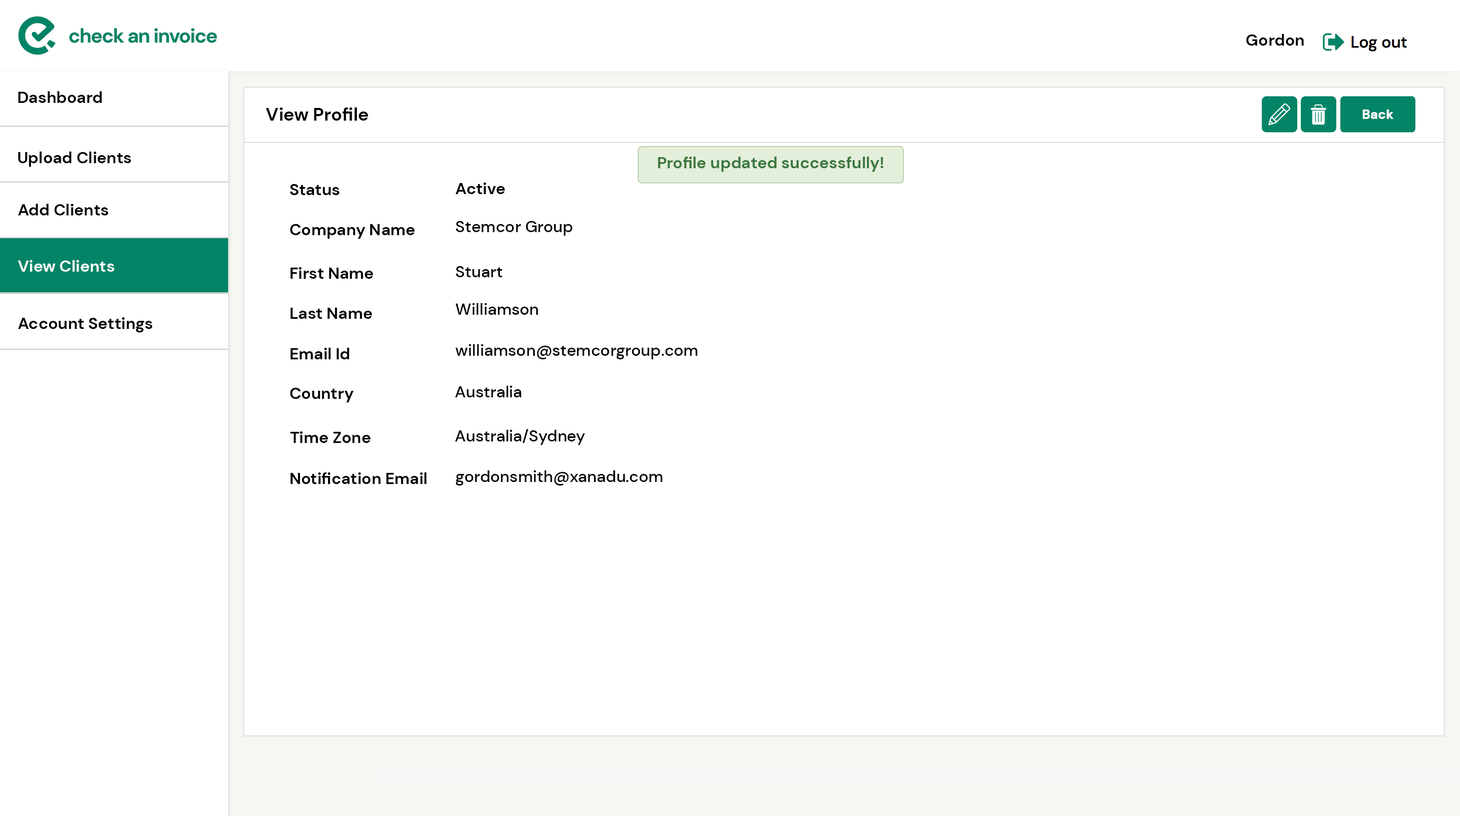
<style>
.page{position:relative;width:1460px;height:816px;background:#ffffff}
.page>*{position:absolute;margin:0}
.t1{font:16.2px "DMSans-Bold";color:#000000}
.t2{font:18.3px "DMSans-Bold";color:#010101}
.t3{font:12.7px "DMSans-Bold";color:#ffffff;font-weight:bold}
.t4{font:16.2px "DMSans-Bold";color:#3c763d}
.t5{font:16.2px "DMSans-Medium";color:#000000}
.t6{font:16.2px "DMSans-Bold";color:#ffffff}
</style>
<div class="page">
<p class="t1" style="left:1246px;top:34px;width:58px;height:12px">Gordon</p>
<p class="t1" style="left:18px;top:91px;width:84px;height:12px">Dashboard</p>
<p class="t2" style="left:266px;top:108px;width:102px;height:13px">View Profile</p>
<p class="t3" style="left:1363px;top:110px;width:31px;height:9px">Back</p>
<p class="t1" style="left:18px;top:152px;width:113px;height:15px">Upload Clients</p>
<p class="t4" style="left:658px;top:157px;width:226px;height:15px">Profile updated successfully!</p>
<p class="t1" style="left:290px;top:184px;width:50px;height:11px">Status</p>
<p class="t1" style="left:455px;top:183px;width:50px;height:11px">Active</p>
<p class="t1" style="left:18px;top:204px;width:91px;height:12px">Add Clients</p>
<p class="t5" style="left:456px;top:221px;width:117px;height:15px">Stemcor Group</p>
<p class="t1" style="left:290px;top:224px;width:125px;height:15px">Company Name</p>
<p class="t6" style="left:18px;top:260px;width:97px;height:12px">View Clients</p>
<p class="t1" style="left:291px;top:267px;width:82px;height:12px">First Name</p>
<p class="t5" style="left:456px;top:266px;width:47px;height:11px">Stuart</p>
<p class="t5" style="left:455px;top:303px;width:83px;height:12px">Williamson</p>
<p class="t1" style="left:18px;top:317px;width:135px;height:16px">Account Settings</p>
<p class="t1" style="left:291px;top:308px;width:81px;height:11px">Last Name</p>
<p class="t1" style="left:291px;top:348px;width:58px;height:12px">Email Id</p>
<p class="t5" style="left:455px;top:344px;width:243px;height:16px">williamson@stemcorgroup.com</p>
<p class="t1" style="left:290px;top:388px;width:64px;height:15px">Country</p>
<p class="t5" style="left:455px;top:386px;width:67px;height:12px">Australia</p>
<p class="t1" style="left:290px;top:432px;width:81px;height:11px">Time Zone</p>
<p class="t5" style="left:455px;top:429px;width:130px;height:16px">Australia/Sydney</p>
<p class="t1" style="left:291px;top:473px;width:136px;height:11px">Notification Email</p>
<p class="t5" style="left:456px;top:471px;width:207px;height:15px">gordonsmith@xanadu.com</p>
</div>
